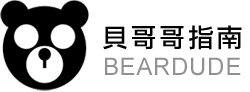
<style>
.page{position:relative;width:250px;height:92px;background:#ffffff}
.page>*{position:absolute;margin:0}
.t1{font:26px "LiGothicMed";letter-spacing:0.1em;color:#000000}
.t2{font:24px "ArialMT";letter-spacing:0.03em;color:#919191}
</style>
<div class="page">
<p class="t1" style="left:103px;top:25px;width:139px;height:25px">貝哥哥指南</p>
<p class="t2" style="left:105px;top:57px;width:136px;height:19px">BEARDUDE</p>
</div>
